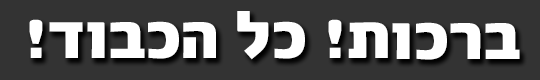
<style>
.page{position:relative;width:540px;height:80px;background:#333333}
.page>*{position:absolute;margin:0}
.t1{font:74.5px "FbAlbatros-Black";color:#ffffff}
</style>
<div class="page">
<p class="t1" style="left:29px;top:11px;width:491px;height:49px">ברכות! כל הכבוד!</p>
</div>
